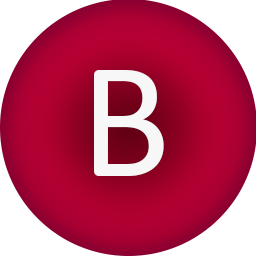
<style>
.page{position:relative;width:256px;height:256px;background:#ffffff}
.page>*{position:absolute;margin:0}
.t1{font:167.3px "Calibri";color:#f7f7f7}
</style>
<div class="page">
<p class="t1" style="left:94px;top:70px;width:70px;height:106px">B</p>
</div>
